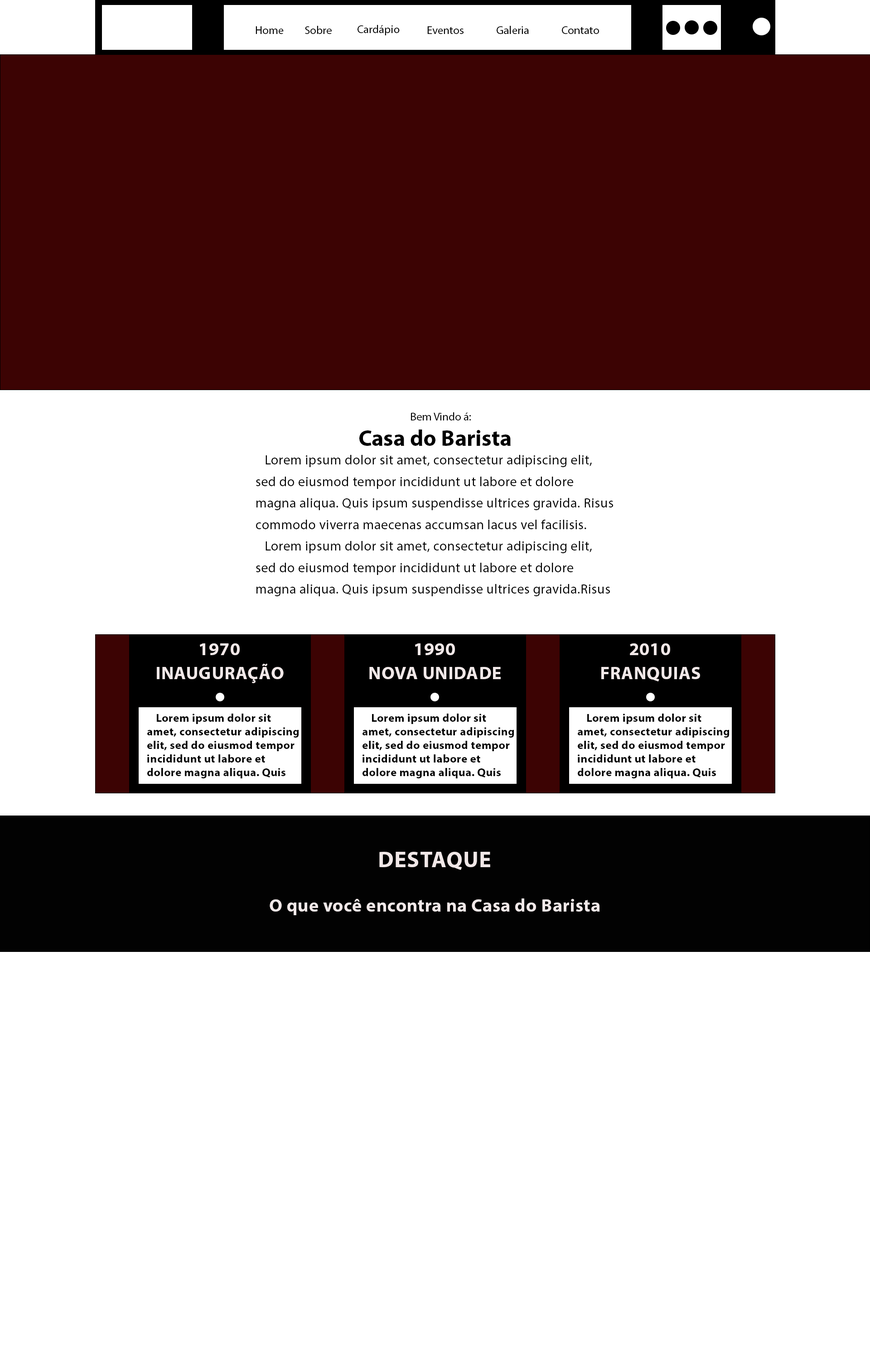
<style>
.page{position:relative;width:870px;height:1371px;background:#ffffff}
.page>*{position:absolute;margin:0}
.t1{font:11.3px "MyriadPro-Regular";color:#000000}
.t2{font:22.7px "MyriadPro-Bold";color:#000000}
.t3{font:13.5px/21.5px "MyriadPro-Regular";letter-spacing:0.025em;color:#000000}
.t4{font:18.1px "MyriadPro-Bold";letter-spacing:0.025em;color:#f1e8e8}
.t5{font:11.3px "MyriadPro-Bold";letter-spacing:0.025em;color:#020202}
.t6{font:22.7px "MyriadPro-Bold";letter-spacing:0.025em;color:#f1e8e8}
</style>
<div class="page">
<p class="t1" style="left:256px;top:26px;width:28px;height:8px">Home</p>
<p class="t1" style="left:305px;top:26px;width:27px;height:8px">Sobre</p>
<p class="t1" style="left:357px;top:25px;width:43px;height:10px">Cardápio</p>
<p class="t1" style="left:427px;top:26px;width:36px;height:8px">Eventos</p>
<p class="t1" style="left:497px;top:26px;width:32px;height:8px">Galeria</p>
<p class="t1" style="left:562px;top:26px;width:37px;height:8px">Contato</p>
<p class="t1" style="left:411px;top:412px;width:60px;height:8px">Bem Vindo á:</p>
<p class="t2" style="left:359px;top:429px;width:152px;height:17px">Casa do Barista</p>
<p class="t3" style="left:256px;top:455px;width:357px;height:141px">Lorem ipsum dolor sit amet, consectetur adipiscing elit, sed do eiusmod tempor incididunt ut labore et dolore magna aliqua. Quis ipsum suspendisse ultrices gravida. Risus commodo viverra maecenas accumsan lacus vel facilisis. <br>Lorem ipsum dolor sit amet, consectetur adipiscing elit, sed do eiusmod tempor incididunt ut labore et dolore magna aliqua. Quis ipsum suspendisse ultrices gravida.Risus</p>
<p class="t4" style="left:200px;top:643px;width:40px;height:12px">1970</p>
<p class="t4" style="left:415px;top:643px;width:40px;height:12px">1990</p>
<p class="t4" style="left:630px;top:643px;width:40px;height:12px">2010</p>
<p class="t4" style="left:157px;top:664px;width:127px;height:19px">INAUGURAÇÃO</p>
<p class="t4" style="left:369px;top:667px;width:132px;height:12px">NOVA UNIDADE</p>
<p class="t4" style="left:601px;top:667px;width:99px;height:14px">FRANQUIAS</p>
<p class="t5" style="left:147px;top:714px;width:152px;height:64px">Lorem ipsum dolor sit amet, consectetur adipiscing elit, sed do eiusmod tempor incididunt ut labore et dolore magna aliqua. Quis ipsum suspendisse ultrices gravida. Risus commodo viverra maecenas accumsan lacus vel facilisis.</p>
<p class="t5" style="left:362px;top:714px;width:152px;height:64px">Lorem ipsum dolor sit amet, consectetur adipiscing elit, sed do eiusmod tempor incididunt ut labore et dolore magna aliqua. Quis ipsum suspendisse ultrices gravida. Risus commodo viverra maecenas accumsan lacus vel facilisis.</p>
<p class="t5" style="left:578px;top:714px;width:151px;height:64px">Lorem ipsum dolor sit amet, consectetur adipiscing elit, sed do eiusmod tempor incididunt ut labore et dolore magna aliqua. Quis ipsum suspendisse ultrices gravida. Risus commodo viverra maecenas accumsan lacus vel facilisis.</p>
<p class="t6" style="left:379px;top:852px;width:111px;height:18px">DESTAQUE</p>
<p class="t4" style="left:270px;top:898px;width:330px;height:17px">O que você encontra na Casa do Barista</p>
</div>
